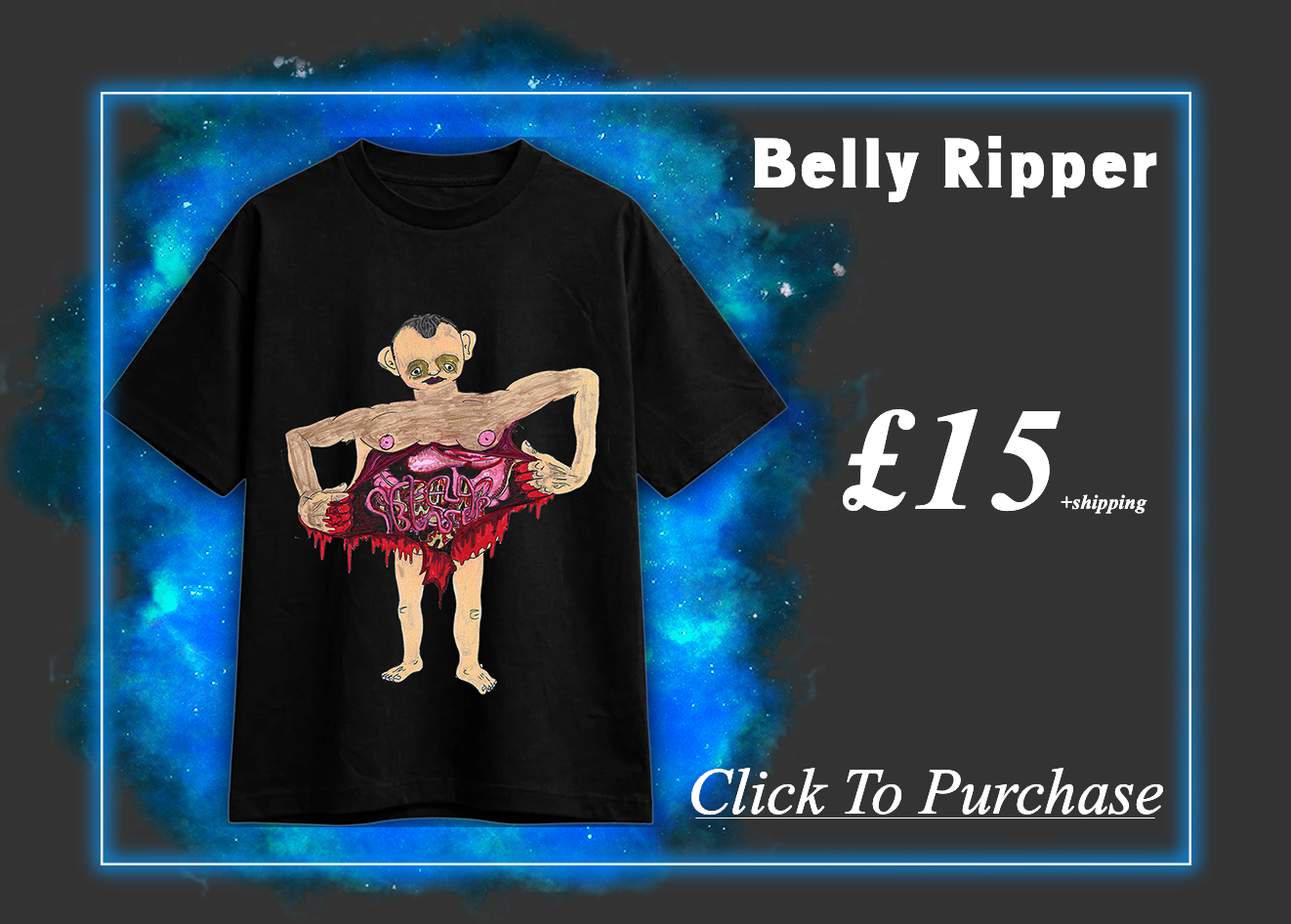
<style>
.page{position:relative;width:1291px;height:924px;background:#333333}
.page>*{position:absolute;margin:0}
.t1{font:65.1px "ARENA";letter-spacing:0.05em;color:#ffffff}
.t2{font:20.3px "TimesNewRomanPS-BoldItalicMT";letter-spacing:0.01em;color:#ffffff}
.t3{font:146.5px "TimesNewRomanPS-BoldItalicMT";letter-spacing:0.05em;color:#ffffff}
.t4{font:65.1px "TimesNewRomanPS-ItalicMT";color:#ffffff}
</style>
<div class="page">
<p class="t1" style="left:754px;top:136px;width:403px;height:66px">Belly Ripper</p>
<p class="t2" style="left:843px;top:409px;width:304px;height:105px"><span class="t3">£15</span>+shipping</p>
<p class="t4" style="left:691px;top:767px;width:472px;height:47px">Click To Purchase</p>
</div>
